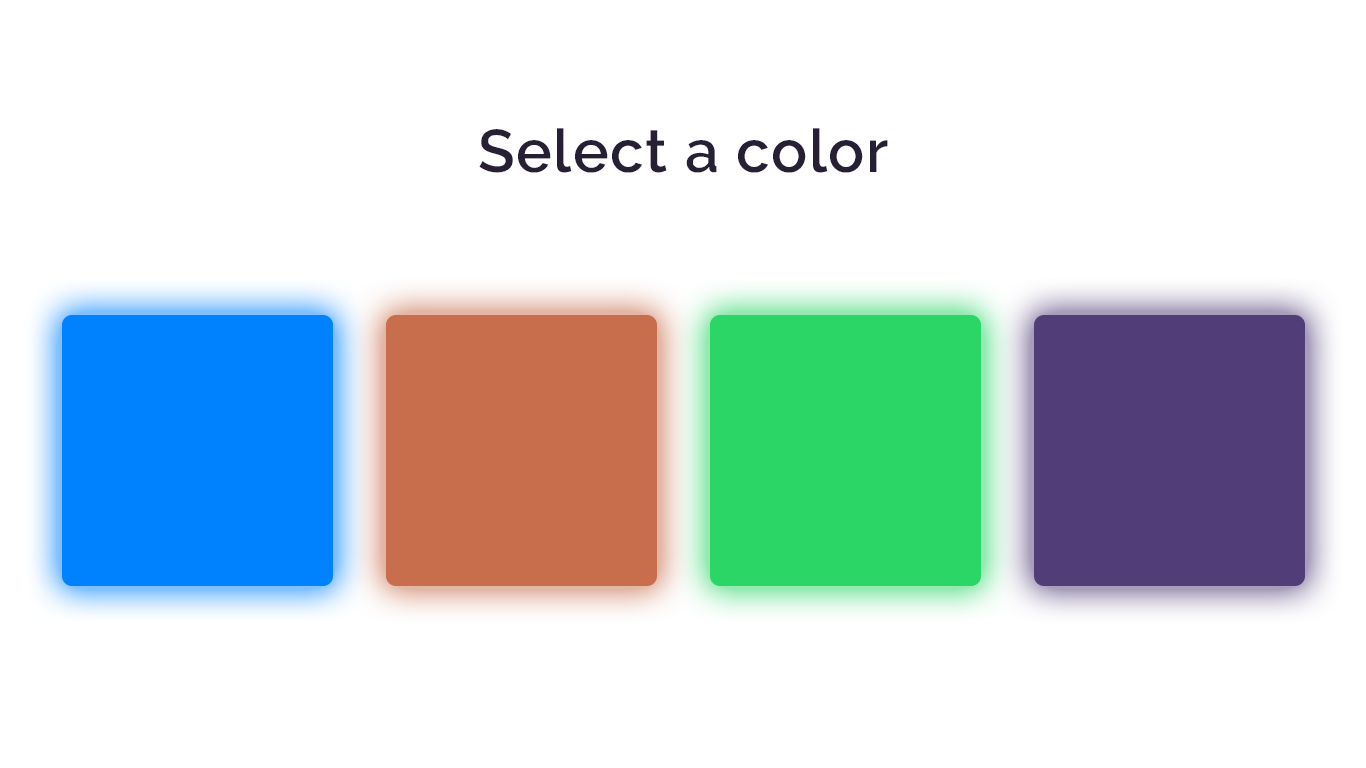
<style>
.page{position:relative;width:1366px;height:768px;background:#ffffff}
.page>*{position:absolute;margin:0}
.t1{font:60px "Raleway-SemiBold";letter-spacing:0.025em;color:#272034}
</style>
<div class="page">
<p class="t1" style="left:479px;top:128px;width:409px;height:45px">Select a color</p>
</div>
